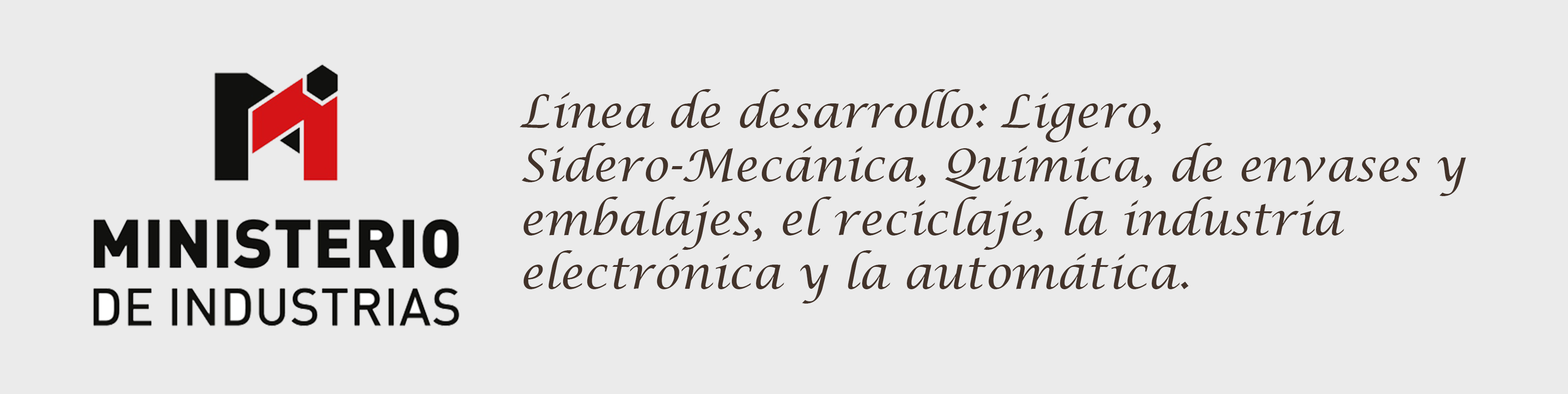
<style>
.page{position:relative;width:1568px;height:394px;background:#ebebeb}
.page>*{position:absolute;margin:0}
.t1{font:44.8px "LucidaCalligraphy-Italic";color:#43332a}
</style>
<div class="page">
<p class="t1" style="left:520px;top:89px;width:946px;height:214px">Línea de desarrollo: Ligero, Sidero-Mecánica, Química, de envases y embalajes, el reciclaje, la industria electrónica y la automática.</p>
</div>
